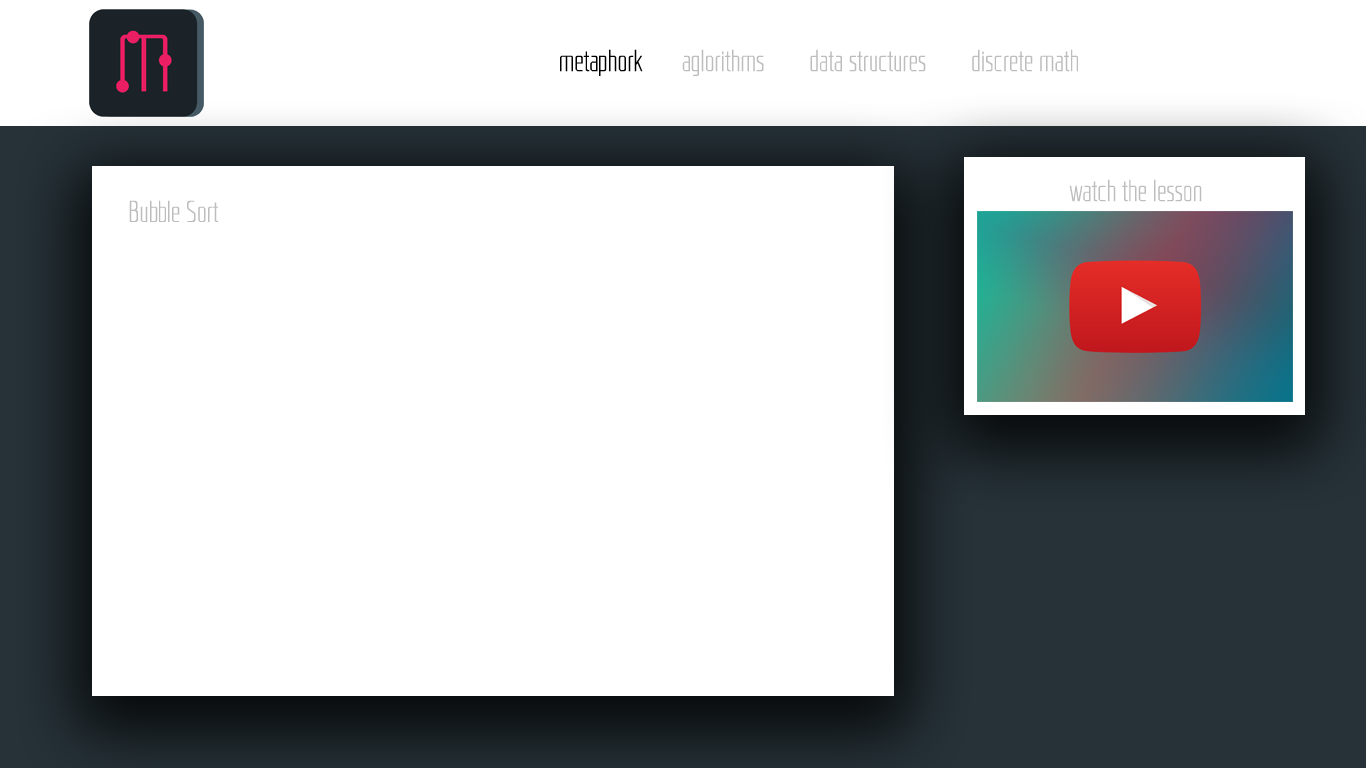
<style>
.page{position:relative;width:1366px;height:768px;background:#ffffff}
.page>*{position:absolute;margin:0}
.t1{font:30px "RBNo2-Light-Alternative";color:#bdbdbd}
.t2{font:30px "RBNo2-Light-Alternative";color:#000000}
</style>
<div class="page">
<p class="t1" style="left:560px;top:49px;width:518px;height:27px"><span class="t2">metaphork </span>      aglorithms        data structures        discrete math</p>
<p class="t1" style="left:1069px;top:179px;width:133px;height:23px">watch the lesson</p>
<p class="t1" style="left:129px;top:200px;width:90px;height:22px">Bubble Sort</p>
</div>
